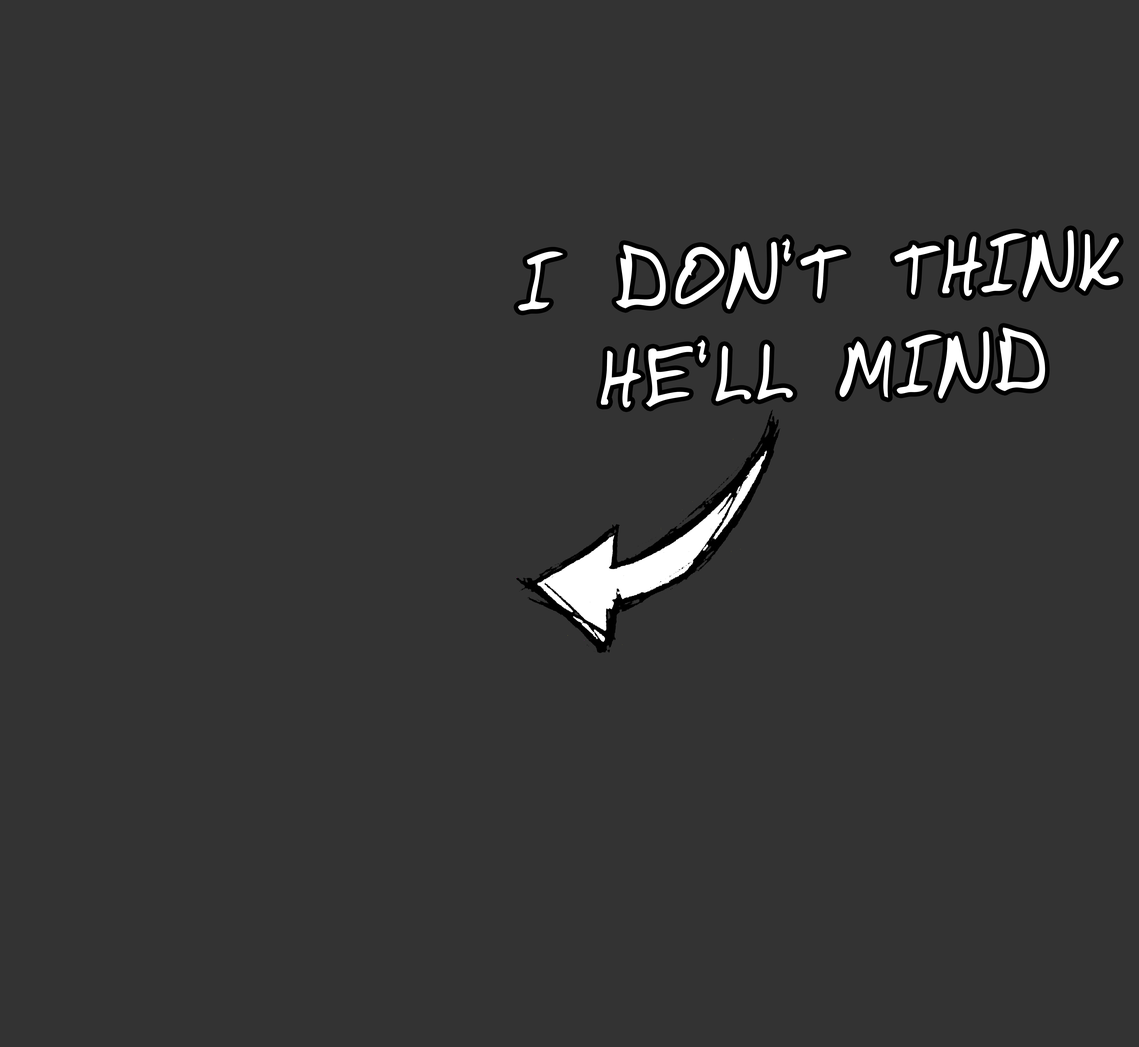
<style>
.page{position:relative;width:1139px;height:1047px;background:#333333}
.page>*{position:absolute;margin:0}
.t1{font:81.5px "DomesticManners";letter-spacing:0.04em;color:#ffffff}
</style>
<div class="page">
<p class="t1" style="left:518px;top:230px;width:601px;height:178px;text-align:center;rotate:-2deg">I DON'T THINK<br>HE'LL MIND</p>
</div>
